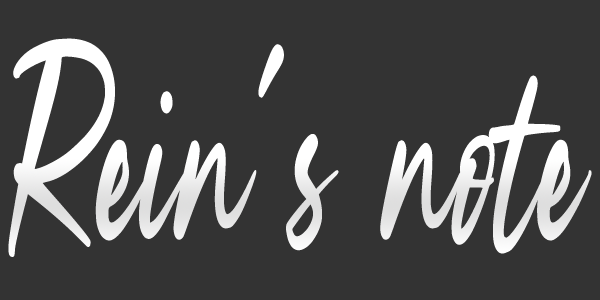
<style>
.page{position:relative;width:600px;height:300px;background:#333333}
.page>*{position:absolute;margin:0}
.t1{font:295.7px "SilentLandfield";color:#ffffff;scale:0.55 1}
</style>
<div class="page">
<p class="t1" style="left:8px;top:38px;width:584px;height:219px">Rein’s note</p>
</div>
